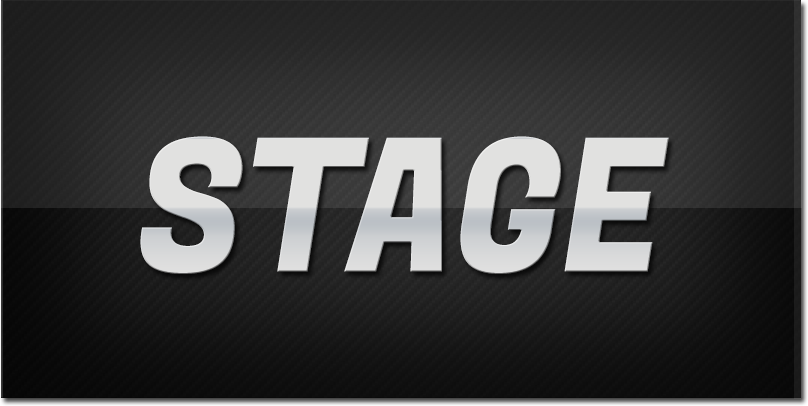
<style>
.page{position:relative;width:808px;height:406px}
.page>*{position:absolute;margin:0}
.t1{font:185.2px "FugazOne-Regular";color:#dfdfdf;scale:0.89 1}
</style>
<div class="page">
<p class="t1" style="left:140px;top:136px;width:529px;height:138px">STAGE</p>
</div>
